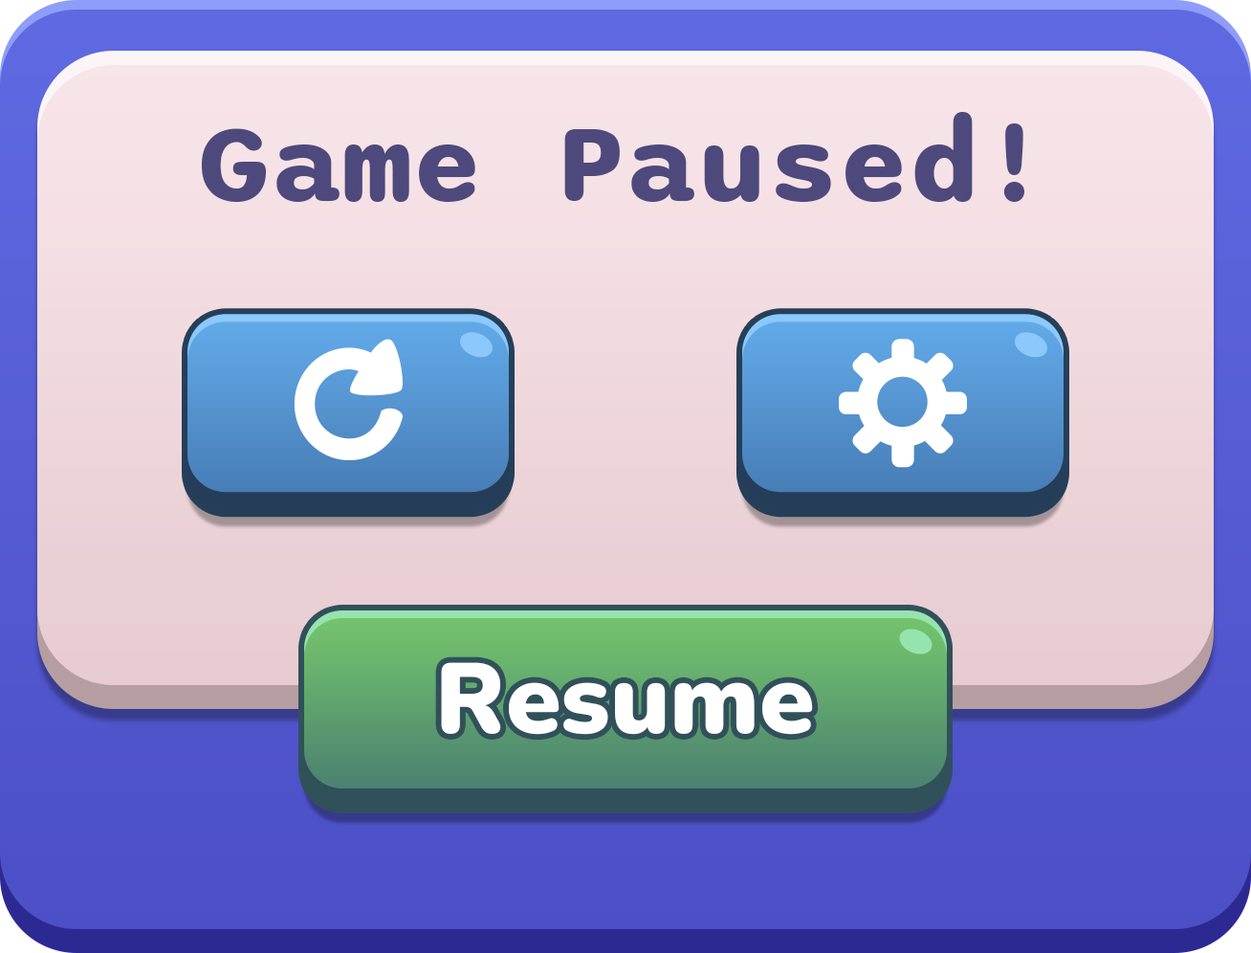
<style>
.page{position:relative;width:1251px;height:953px}
.page>*{position:absolute;margin:0}
.t1{font:114.8px "Sono-Bold";color:#4e497c}
.t2{font:99.5px "Nunito-Black";color:#ffffff}
</style>
<div class="page">
<p class="t1" style="left:201px;top:112px;width:825px;height:90px">Game Paused!</p>
<p class="t2" style="left:441px;top:662px;width:372px;height:73px">Resume</p>
</div>
